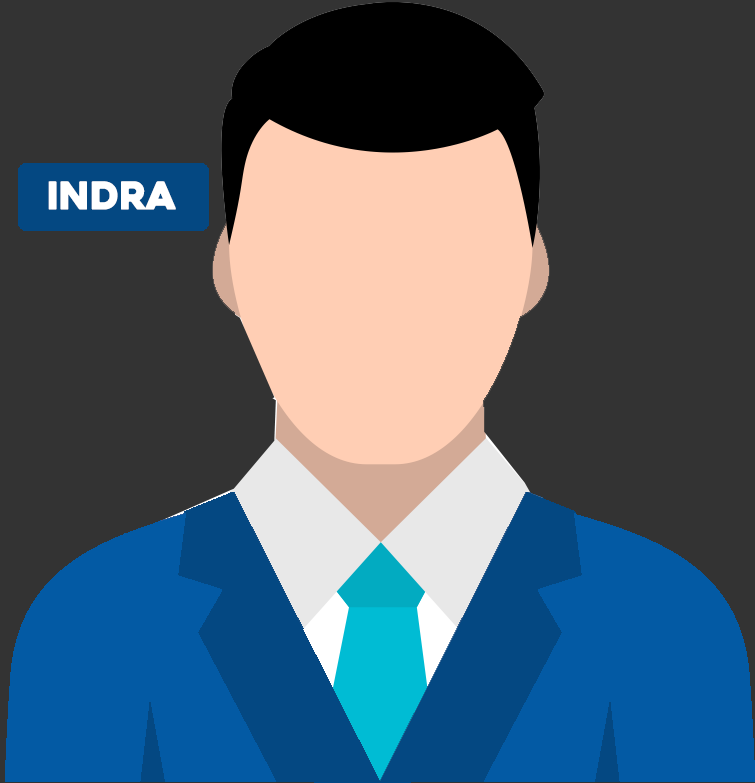
<style>
.page{position:relative;width:755px;height:783px;background:#333333}
.page>*{position:absolute;margin:0}
.t1{font:38.4px "Heavitas";letter-spacing:-0.025em;color:#ffffff}
</style>
<div class="page">
<p class="t1" style="left:48px;top:181px;width:128px;height:29px">INDRA</p>
</div>
